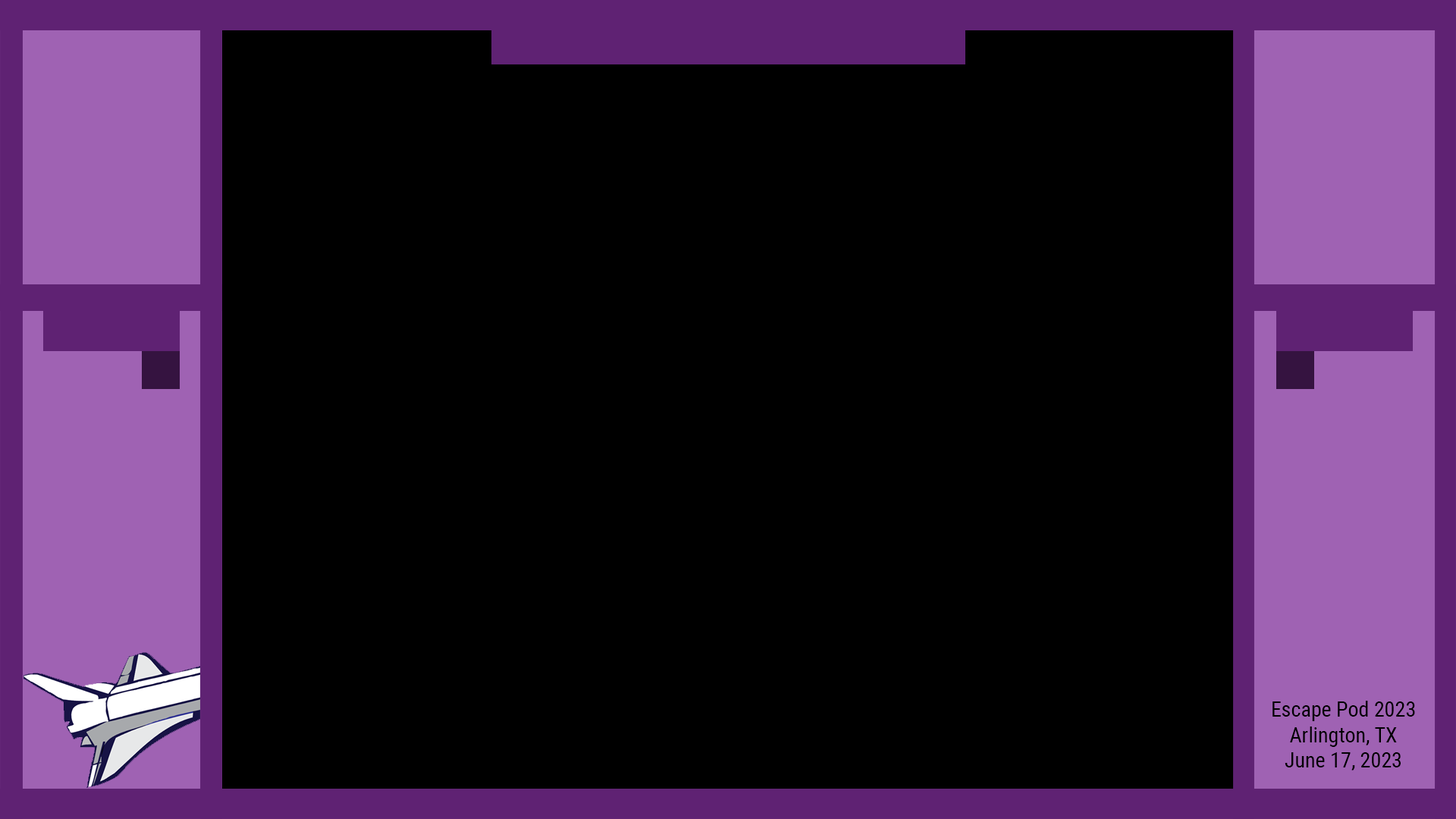
<style>
.page{position:relative;width:1456px;height:819px;background:#000000}
.page>*{position:absolute;margin:0}
.t1{font:21.2px "RobotoCondensed-Regular";color:#000000}
</style>
<div class="page">
<p class="t1" style="left:1272px;top:701px;width:143px;height:69px;text-align:center">Escape Pod 2023<br>Arlington, TX<br>June 17, 2023</p>
</div>
